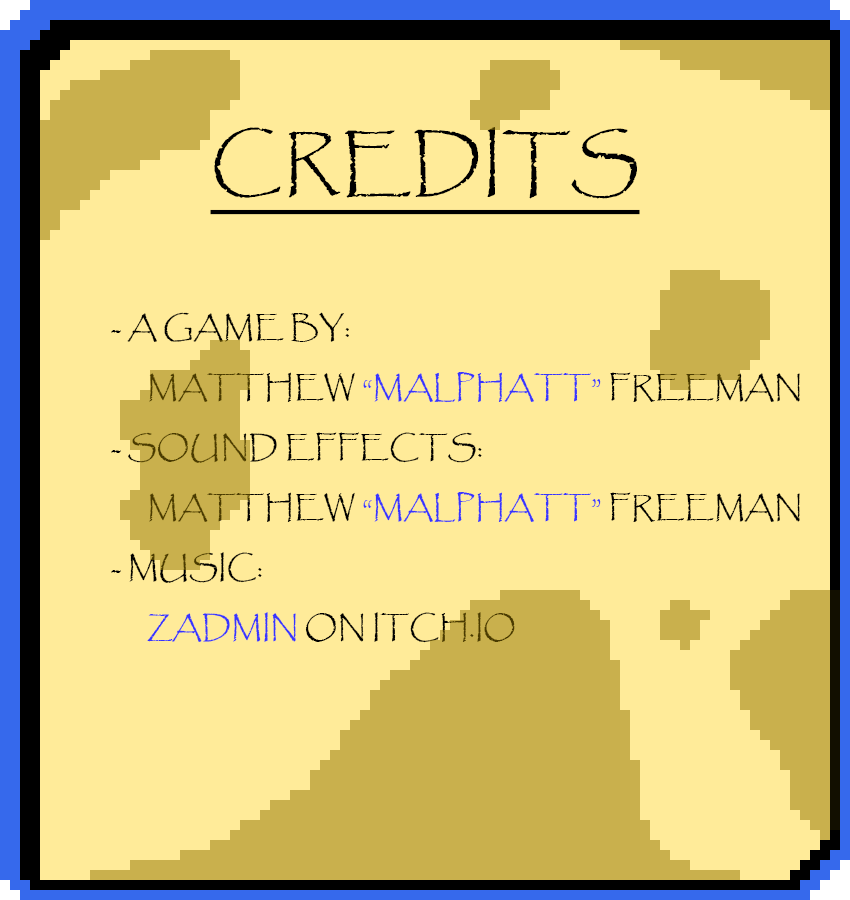
<style>
.page{position:relative;width:850px;height:900px;background:#ffeb99}
.page>*{position:absolute;margin:0}
.t1{font:72px "Papyrus-Regular";color:#000000;text-transform:uppercase;text-decoration:underline}
.t2{font:30px/60px "Papyrus-Regular";color:#000000;text-transform:uppercase}
.t3{font:30px/60px "Papyrus-Regular";color:#3734ff;text-transform:uppercase}
</style>
<div class="page">
<p class="t1" style="left:210px;top:127px;width:430px;height:88px">Credits</p>
<p class="t2" style="left:111px;top:312px;width:689px;height:331px">- A Game By:<br> Matthew <span class="t3">“Malphatt”</span> Freeman<br>- Sound Effects:<br> Matthew <span class="t3">“Malphatt”</span> Freeman<br>- Music:<br> <span class="t3">zadmin</span> on itch.io</p>
</div>
